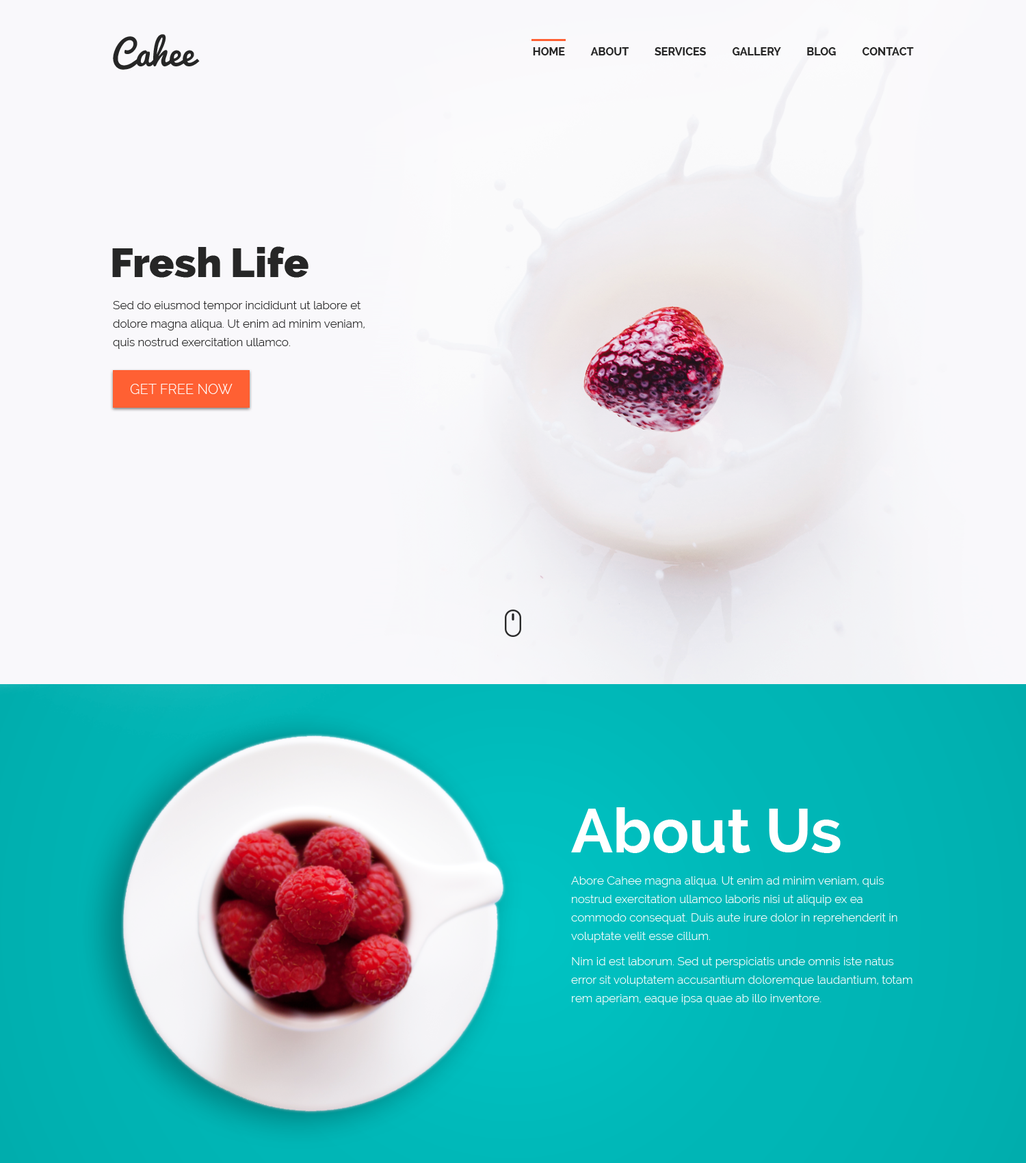
<style>
.page{position:relative;width:1026px;height:1163px;background:#f9f8fb}
.page>*{position:absolute;margin:0}
.t1{font:34.2px "Pacifico-Regular";color:#262626}
.t2{font:10.9px "Raleway-Bold";color:#262626}
.t3{font:41px "Raleway-Heavy";color:#262626}
.t4{font:11.6px/18.5px "Raleway-Light";color:#262626}
.t5{font:13.7px "Raleway-Light";color:#ffffff}
.t6{font:61.5px "Raleway-Bold";color:#ffffff}
.t7{font:11.6px/18.5px "Raleway-Light";color:#ffffff}
</style>
<div class="page">
<p class="t1" style="left:113px;top:34px;width:87px;height:36px">Cahee</p>
<p class="t2" style="left:533px;top:47px;width:381px;height:8px">HOME          ABOUT          SERVICES          GALLERY          BLOG          CONTACT</p>
<p class="t3" style="left:112px;top:246px;width:196px;height:32px">Fresh Life</p>
<p class="t4" style="left:113px;top:301px;width:251px;height:48px">Sed do eiusmod tempor incididunt ut labore et dolore magna aliqua. Ut enim ad minim veniam, quis nostrud exercitation ullamco.</p>
<p class="t5" style="left:130px;top:384px;width:103px;height:10px">GET FREE NOW</p>
<p class="t6" style="left:571px;top:807px;width:269px;height:46px">About Us</p>
<p class="t7" style="left:571px;top:876px;width:341px;height:129px">Abore Cahee magna aliqua. Ut enim ad minim veniam, quis nostrud exercitation ullamco laboris nisi ut aliquip ex ea commodo consequat. Duis aute irure dolor in reprehenderit in voluptate velit esse cillum.<br>Nim id est laborum. Sed ut perspiciatis unde omnis iste natus error sit voluptatem accusantium doloremque laudantium, totam rem aperiam, eaque ipsa quae ab illo inventore.</p>
</div>
